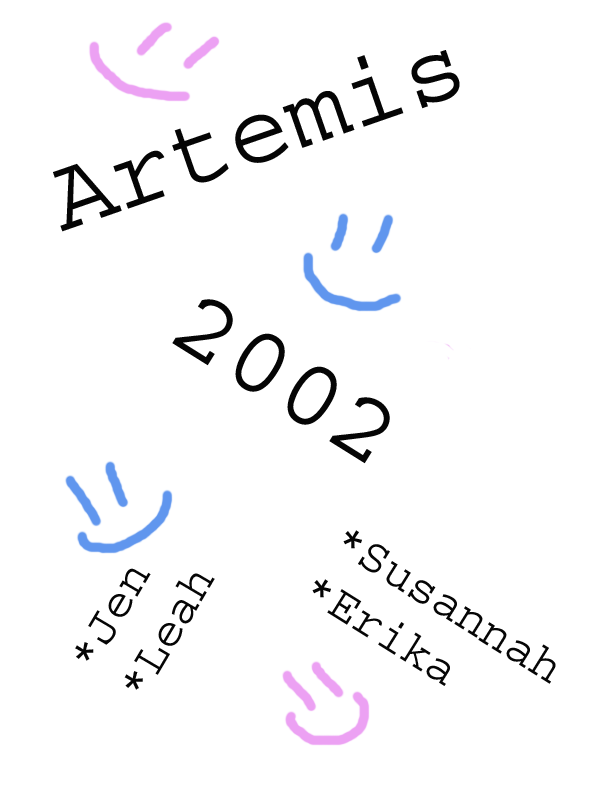
<style>
.page{position:relative;width:612px;height:792px;background:#ffffff}
.page>*{position:absolute;margin:0}
.t1{font:102.8px "Courier";color:#050505}
.t2{font:48px "Courier";color:#050505}
</style>
<div class="page">
<p class="t1" style="left:53px;top:50px;width:407px;height:182px;rotate:-19deg">Artemis</p>
<p class="t1" style="left:172px;top:299px;width:218px;height:165px;rotate:32deg">2002</p>
<p class="t2" style="left:75px;top:568px;width:140px;height:122px;rotate:-59deg">*Jen      <br>*Leah</p>
</div>
